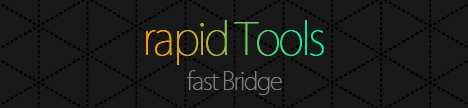
<style>
.page{position:relative;width:468px;height:108px;background:#181818}
.page>*{position:absolute;margin:0}
.t1{font:44.1px "KozGoPr6N-ExtraLight";letter-spacing:-0.06em}
.t2{font:24.1px "KozGoPr6N-ExtraLight";letter-spacing:-0.06em;color:#7f7f7f}
</style>
<div class="page">
<p class="t1" style="left:146px;top:20px;width:178px;height:45px">rapid Tools</p>
<p class="t2" style="left:187px;top:70px;width:95px;height:25px">fast Bridge</p>
</div>
